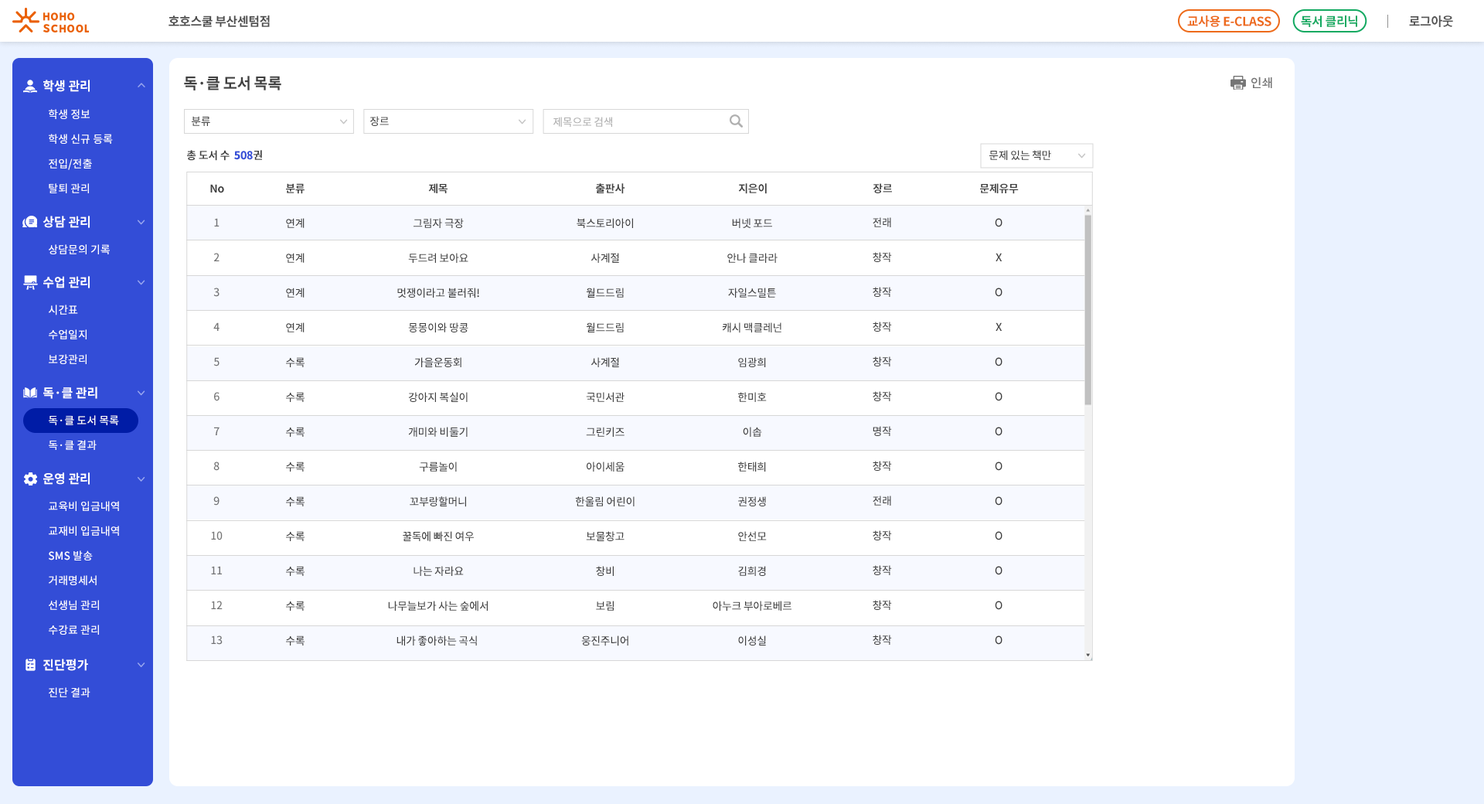
<style>
.page{position:relative;width:1484px;height:804px;background:#ffffff}
.page>*{position:absolute;margin:0}
.t1{font:12.4px "NotoSansCJKkr-Bold";letter-spacing:-0.025em;color:#4d4d4d}
.t2{font:12.4px "NotoSansCJKkr-Bold";letter-spacing:-0.025em;color:#ed6a1a}
.t3{font:12.4px "NotoSansCJKkr-Bold";letter-spacing:-0.025em;color:#13a961}
.t4{font:12.4px "NotoSansCJKkr-Bold";letter-spacing:-0.025em;color:#565656}
.t5{font:15.5px "NotoSansCJKkr-Bold";letter-spacing:-0.025em;color:#404040}
.t6{font:12.4px "NotoSansCJKkr-Medium";color:#757575}
.t7{font:12.4px "NotoSansCJKkr-Bold";color:#ffffff}
.t8{font:10.8px/24.7px "NotoSansCJKkr-Medium";color:#ffffff}
.t9{font:10.8px "NotoSansCJKkr-Medium";letter-spacing:-0.025em;color:#404040}
.t10{font:10.8px "NotoSansCJKkr-Medium";letter-spacing:-0.025em;color:#b0b0b0}
.t11{font:10.8px "NotoSansCJKkr-Bold";letter-spacing:-0.025em;color:#404040}
.t12{font:10.8px "NotoSansCJKkr-Black";letter-spacing:-0.025em;color:#334dd7}
.t13{font:10.8px/34.8px "NotoSansCJKkr-Medium";letter-spacing:-0.025em;color:#727375}
.t14{font:10.8px/34.8px "NotoSansCJKkr-Medium";letter-spacing:-0.025em;color:#404040}
.t15{font:10.8px "NotoSansCJKkr-Medium";color:#ffffff}
</style>
<div class="page">
<p class="t1" style="left:168px;top:15px;width:102px;height:12px">호호스쿨 부산센텀점</p>
<p class="t2" style="left:1187px;top:15px;width:84px;height:12px">교사용 E-CLASS</p>
<p class="t3" style="left:1301px;top:15px;width:56px;height:12px">독서 클리닉</p>
<p class="t4" style="left:1409px;top:15px;width:44px;height:12px">로그아웃</p>
<p class="t5" style="left:184px;top:76px;width:97px;height:14px">독·클 도서 목록</p>
<p class="t6" style="left:1251px;top:77px;width:21px;height:11px">인쇄</p>
<p class="t7" style="left:43px;top:80px;width:47px;height:12px">학생 관리</p>
<p class="t8" style="left:49px;top:109px;width:64px;height:84px">학생 정보<br>학생 신규 등록<br>전입/전출<br>탈퇴 관리</p>
<p class="t9" style="left:192px;top:116px;width:18px;height:10px">분류</p>
<p class="t9" style="left:370px;top:116px;width:19px;height:10px">장르</p>
<p class="t10" style="left:553px;top:117px;width:59px;height:10px">제목으로 검색</p>
<p class="t11" style="left:187px;top:150px;width:75px;height:11px">총 도서 수  <span class="t12">508</span>권</p>
<p class="t9" style="left:989px;top:150px;width:62px;height:10px">문제 있는 책만</p>
<p class="t11" style="left:210px;top:184px;width:14px;height:9px">No</p>
<p class="t11" style="left:286px;top:183px;width:18px;height:11px">분류</p>
<p class="t11" style="left:428px;top:183px;width:19px;height:10px">제목</p>
<p class="t11" style="left:596px;top:183px;width:29px;height:11px">출판사</p>
<p class="t11" style="left:738px;top:183px;width:29px;height:11px">지은이</p>
<p class="t11" style="left:872px;top:183px;width:20px;height:10px">장르</p>
<p class="t11" style="left:980px;top:183px;width:39px;height:11px">문제유무</p>
<p class="t7" style="left:43px;top:216px;width:47px;height:12px">상담 관리</p>
<p class="t13" style="left:211px;top:218px;width:12px;height:426px;text-align:center">1<br>2<br>3<br>4<br>5<br>6<br>7<br>8<br>9<br>10<br>11<br>12<br>13</p>
<p class="t14" style="left:286px;top:218px;width:18px;height:427px">연계<br>연계<br>연계<br>연계<br>수록<br>수록<br>수록<br>수록<br>수록<br>수록<br>수록<br>수록<br>수록</p>
<p class="t14" style="left:388px;top:218px;width:100px;height:428px;text-align:center">그림자 극장<br>두드려 보아요<br>멋쟁이라고 불러줘!<br>몽몽이와 땅콩<br>가을운동회<br>강아지 복실이<br>개미와 비둘기<br>구름놀이<br>꼬부랑할머니<br>꿀독에 빠진 여우<br>나는 자라요<br>나무늘보가 사는 숲에서<br>내가 좋아하는 곡식</p>
<p class="t14" style="left:575px;top:218px;width:59px;height:428px;text-align:center">북스토리아이<br>사계절<br>월드드림<br>월드드림<br>사계절<br>국민서관<br>그린키즈<br>아이세움<br>한울림 어린이<br>보물창고<br>창비<br>보림<br>웅진주니어</p>
<p class="t14" style="left:712px;top:218px;width:79px;height:427px;text-align:center">버넷 포드<br>안나 클라라<br>자일스밀튼<br>캐시 맥클레넌<br>임광희<br>한미호<br>이솝<br>한태희<br>권정생<br>안선모<br>김희경<br>아누크 부아로베르<br>이성실</p>
<p class="t14" style="left:872px;top:217px;width:20px;height:427px;text-align:center">전래<br>창작<br>창작<br>창작<br>창작<br>창작<br>명작<br>창작<br>전래<br>창작<br>창작<br>창작<br>창작</p>
<p class="t14" style="left:995px;top:218px;width:7px;height:426px;text-align:center">O<br>X<br>O<br>X<br>O<br>O<br>O<br>O<br>O<br>O<br>O<br>O<br>O</p>
<p class="t15" style="left:49px;top:244px;width:61px;height:10px">상담문의 기록</p>
<p class="t7" style="left:43px;top:276px;width:47px;height:12px">수업 관리</p>
<p class="t8" style="left:49px;top:304px;width:38px;height:60px">시간표<br>수업일지<br>보강관리</p>
<p class="t7" style="left:43px;top:386px;width:54px;height:13px">독·클 관리</p>
<p class="t8" style="left:49px;top:415px;width:70px;height:35px">독·클 도서 목록<br>독·클 결과</p>
<p class="t7" style="left:43px;top:472px;width:47px;height:13px">운영 관리</p>
<p class="t8" style="left:49px;top:501px;width:70px;height:133px">교육비 입금내역<br>교재비 입금내역<br>SMS 발송<br>거래명세서<br>선생님 관리<br>수강료 관리</p>
<p class="t7" style="left:43px;top:658px;width:45px;height:13px">진단평가</p>
<p class="t15" style="left:49px;top:687px;width:41px;height:10px">진단 결과</p>
</div>
